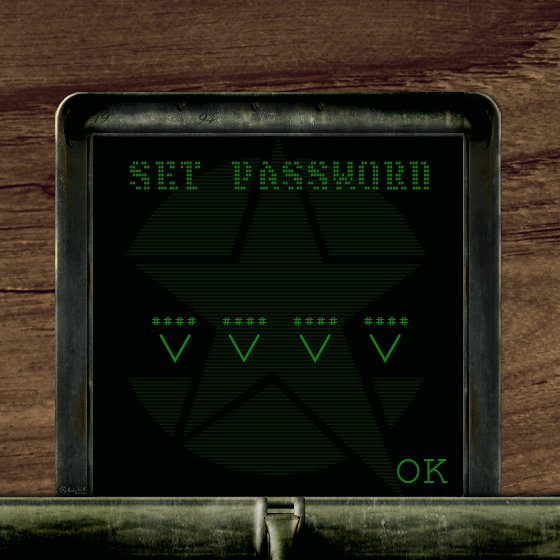
<style>
.page{position:relative;width:560px;height:560px;background:#000400}
.page>*{position:absolute;margin:0}
.t1{font:18px "EdwardianScriptITC";color:#111411}
.t2{font:3.5px "CourierNewPSMT";color:#10820d;scale:1.36 1}
.t3{font:10.9px "CourierNewPSMT";color:#10820d;scale:1.8 1}
.t4{font:60.1px "CourierNewPSMT";color:#10820d}
.t5{font:42.3px "CourierNewPSMT";color:#10820d;scale:1.04 1}
</style>
<div class="page">
<p class="t1" style="left:94px;top:112px;width:16px;height:11px">19</p>
<p class="t1" style="left:197px;top:112px;width:22px;height:12px">94</p>
<p class="t2" style="left:130px;top:161px;width:299px;height:29px;text-align:center">## ##   ### ###  #### ##           ### ##     ##      ## ##    ## ##   ##   ##   ## ##   ### ##   ### ##   <br>##   ##   ##  ##  # ## ##            ##  ##     ##    ##   ##  ##   ##  ##   ##  ##   ##   ##  ##   ##  ##  <br>####      ##        ##               ##  ##   ## ##   ####     ####     ##   ##  ##   ##   ##  ##   ##  ##  <br> #####    ## ##     ##               ##  ##   ##  ##   #####    #####   ## # ##  ##   ##   ## ##    ##  ##  <br>    ###   ##        ##               ## ##    ## ###      ###      ###  # ### #  ##   ##   ## ##    ##  ##  <br>##   ##   ##  ##    ##               ##       ##  ##  ##   ##  ##   ##   ## ##   ##   ##   ##  ##   ##  ##  <br> ## ##   ### ###   ####             ####     ###  ##   ## ##    ## ##   ##   ##   ## ##   #### ##  ### ##</p>
<p class="t3" style="left:151px;top:317px;width:257px;height:8px">####  ####  ####  ####</p>
<p class="t4" style="left:159px;top:334px;width:32px;height:29px;rotate:-90deg">&lt;</p>
<p class="t4" style="left:228px;top:334px;width:32px;height:29px;rotate:-90deg">&lt;</p>
<p class="t4" style="left:299px;top:334px;width:32px;height:29px;rotate:-90deg">&lt;</p>
<p class="t4" style="left:369px;top:334px;width:32px;height:29px;rotate:-90deg">&lt;</p>
<p class="t5" style="left:397px;top:459px;width:51px;height:24px">OK</p>
</div>
